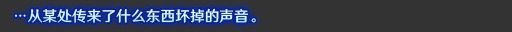
<style>
.page{position:relative;width:512px;height:32px;background:#333333}
.page>*{position:absolute;margin:0}
.t1{font:14.7px "HYWenHei-FEW";letter-spacing:0.005em;color:#d1f8ff}
</style>
<div class="page">
<p class="t1" style="left:15px;top:8px;width:241px;height:15px">…从某处传来了什么东西坏掉的声音。</p>
</div>
